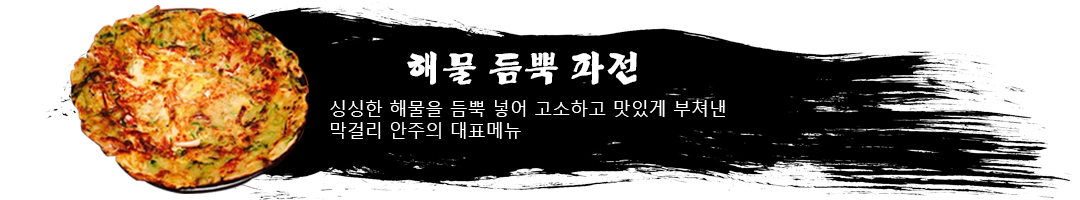
<style>
.page{position:relative;width:1080px;height:200px;background:#ffffff}
.page>*{position:absolute;margin:0}
.t1{font:34.7px "Yj-BACDOO-Bold";color:#ffffff}
.t2{font:18px "MalgunGothic";color:#ffffff}
</style>
<div class="page">
<p class="t1" style="left:407px;top:51px;width:230px;height:34px">해물 듬뿍 파전</p>
<p class="t2" style="left:330px;top:100px;width:395px;height:39px">싱싱한 해물을 듬뿍 넣어 고소하고 맛있게 부쳐낸<br>막걸리 안주의 대표메뉴</p>
</div>
